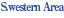
<style>
.page{position:relative;width:64px;height:18px;background:#ffffff}
.page>*{position:absolute;margin:0}
.t1{font:12px "RyuminPro-ExBold";letter-spacing:-0.08em;color:#2f4e96;scale:0.85 1}
</style>
<div class="page">
<p class="t1" style="left:0px;top:1px;width:65px;height:11px">S.western Area</p>
</div>
